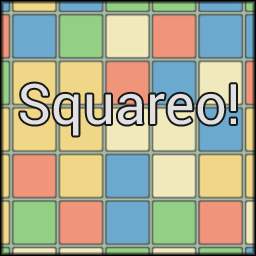
<style>
.page{position:relative;width:256px;height:256px}
.page>*{position:absolute;margin:0}
.t1{font:56px "Roboto-Regular";color:#e1e1e1}
</style>
<div class="page">
<p class="t1" style="left:20px;top:83px;width:216px;height:53px">Squareo!</p>
</div>
